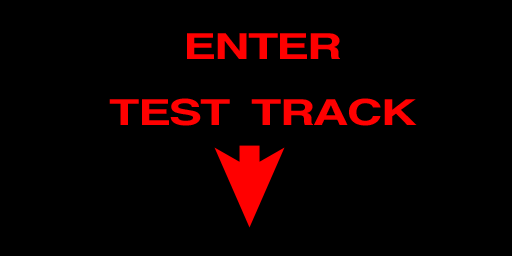
<style>
.page{position:relative;width:512px;height:256px;background:#000000}
.page>*{position:absolute;margin:0}
.t1{font:35.8px "Helvetica-Bold";letter-spacing:-0.04em;color:#ff0000;scale:1.38 1}
</style>
<div class="page">
<p class="t1" style="left:109px;top:33px;width:308px;height:93px;text-align:center">ENTER<br>TEST  TRACK</p>
</div>
